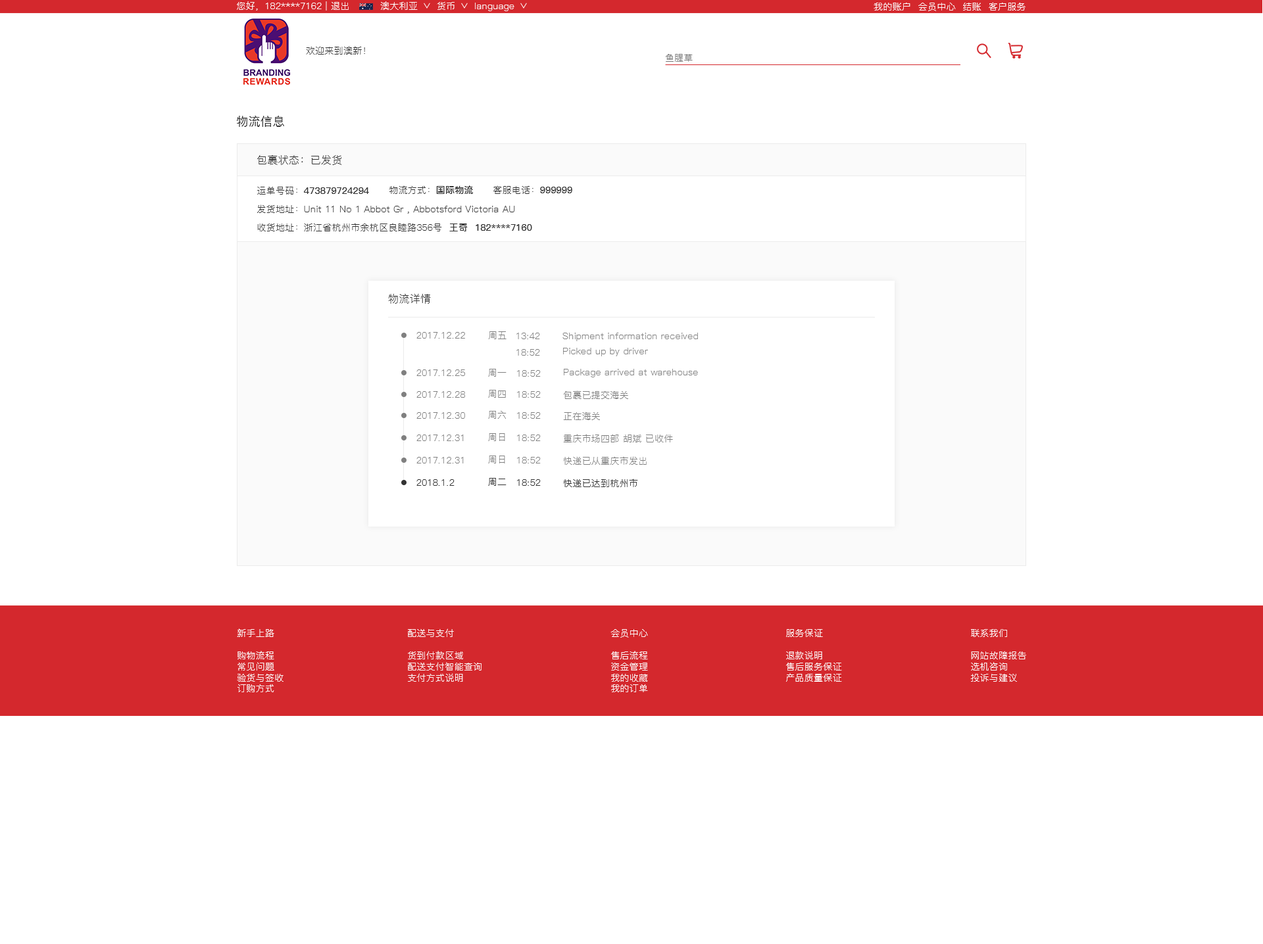
<style>
.page{position:relative;width:1263px;height:944px;background:#ffffff}
.page>*{position:absolute;margin:0}
.t1{font:9.2px "PingFang-SC-Regular";letter-spacing:0.02em;color:#ffffff}
.t2{font:9.2px "PingFang-SC-Regular";letter-spacing:0.02em;color:#333333}
.t3{font:9.2px "PingFang-SC-Regular";letter-spacing:0.02em;color:#767676}
.t4{font:11.8px "PingFang-SC-Medium";letter-spacing:0.02em;color:#333333}
.t5{font:10.5px "PingFang-SC-Regular";letter-spacing:0.02em;color:#333333}
.t6{font:9.2px "PingFang-SC-Bold";letter-spacing:0.02em;color:#333333}
.t7{font:9.2px "PingFang-SC-Regular";letter-spacing:0.02em;color:#808080}
.t8{font:9.2px "PingFang-SC-Regular";letter-spacing:0.02em;color:#fffefe}
</style>
<div class="page">
<p class="t1" style="left:237px;top:1px;width:112px;height:10px">您好，182****7162 | 退出</p>
<p class="t1" style="left:380px;top:1px;width:38px;height:9px">澳大利亚</p>
<p class="t1" style="left:437px;top:2px;width:17px;height:8px">货币</p>
<p class="t1" style="left:475px;top:3px;width:39px;height:8px">language</p>
<p class="t1" style="left:873px;top:2px;width:152px;height:9px">我的账户  会员中心  结账  客户服务</p>
<p class="t2" style="left:306px;top:46px;width:59px;height:9px">欢迎来到澳新！</p>
<p class="t3" style="left:665px;top:54px;width:27px;height:8px">鱼腥草</p>
<p class="t4" style="left:237px;top:116px;width:47px;height:11px">物流信息</p>
<p class="t5" style="left:257px;top:155px;width:85px;height:10px">包裹状态：已发货</p>
<p class="t2" style="left:389px;top:185px;width:84px;height:9px">物流方式：<span class="t6">国际物流</span></p>
<p class="t6" style="left:493px;top:185px;width:79px;height:9px"><span class="t2">客服电话：</span>999999</p>
<p class="t6" style="left:257px;top:187px;width:112px;height:8px"><span class="t2">运单号码：</span>473879724294</p>
<p class="t2" style="left:257px;top:205px;width:258px;height:9px">发货地址：Unit 11 No 1 Abbot Gr , Abbotsford Victoria AU</p>
<p class="t2" style="left:257px;top:223px;width:275px;height:8px">收货地址：浙江省杭州市余杭区良睦路356号  <span class="t6">王奇  182****7160</span></p>
<p class="t5" style="left:388px;top:294px;width:43px;height:10px">物流详情</p>
<p class="t7" style="left:416px;top:332px;width:49px;height:7px">2017.12.22</p>
<p class="t7" style="left:488px;top:331px;width:18px;height:8px">周五</p>
<p class="t7" style="left:516px;top:333px;width:24px;height:6px">13:42</p>
<p class="t7" style="left:562px;top:333px;width:136px;height:8px">Shipment information received</p>
<p class="t7" style="left:516px;top:349px;width:24px;height:7px">18:52</p>
<p class="t7" style="left:563px;top:348px;width:85px;height:8px">Picked up by driver</p>
<p class="t7" style="left:416px;top:370px;width:49px;height:6px">2017.12.25</p>
<p class="t7" style="left:488px;top:369px;width:18px;height:8px">周一</p>
<p class="t7" style="left:517px;top:370px;width:24px;height:7px">18:52</p>
<p class="t7" style="left:564px;top:369px;width:134px;height:8px">Package arrived at warehouse</p>
<p class="t7" style="left:488px;top:390px;width:18px;height:8px">周四</p>
<p class="t7" style="left:416px;top:391px;width:49px;height:7px">2017.12.28</p>
<p class="t7" style="left:517px;top:391px;width:24px;height:7px">18:52</p>
<p class="t7" style="left:563px;top:391px;width:65px;height:8px">包裹已提交海关</p>
<p class="t7" style="left:416px;top:412px;width:49px;height:7px">2017.12.30</p>
<p class="t7" style="left:488px;top:411px;width:18px;height:8px">周六</p>
<p class="t7" style="left:517px;top:412px;width:24px;height:7px">18:52</p>
<p class="t7" style="left:563px;top:412px;width:37px;height:8px">正在海关</p>
<p class="t7" style="left:416px;top:435px;width:48px;height:6px">2017.12.31</p>
<p class="t7" style="left:488px;top:433px;width:17px;height:8px">周日</p>
<p class="t7" style="left:517px;top:435px;width:24px;height:6px">18:52</p>
<p class="t7" style="left:563px;top:434px;width:110px;height:9px">重庆市场四部 胡斌 已收件</p>
<p class="t7" style="left:416px;top:457px;width:48px;height:7px">2017.12.31</p>
<p class="t7" style="left:488px;top:456px;width:17px;height:8px">周日</p>
<p class="t7" style="left:517px;top:457px;width:24px;height:7px">18:52</p>
<p class="t7" style="left:563px;top:456px;width:83px;height:9px">快递已从重庆市发出</p>
<p class="t2" style="left:416px;top:479px;width:38px;height:7px">2018.1.2</p>
<p class="t2" style="left:488px;top:478px;width:18px;height:8px">周二</p>
<p class="t2" style="left:517px;top:479px;width:24px;height:7px">18:52</p>
<p class="t2" style="left:563px;top:479px;width:75px;height:8px">快递已达到杭州市</p>
<p class="t8" style="left:237px;top:629px;width:46px;height:63px">新手上路<br><br>购物流程<br>常见问题<br>验货与签收<br>订购方式</p>
<p class="t8" style="left:408px;top:629px;width:73px;height:53px">配送与支付<br><br>货到付款区域<br>配送支付智能查询<br>支付方式说明</p>
<p class="t8" style="left:610px;top:629px;width:38px;height:63px">会员中心<br><br>售后流程<br>资金管理<br>我的收藏<br>我的订单</p>
<p class="t8" style="left:786px;top:629px;width:56px;height:53px">服务保证<br><br>退款说明<br>售后服务保证<br>产品质量保证</p>
<p class="t8" style="left:970px;top:629px;width:56px;height:53px">联系我们<br><br>网站故障报告<br>选机咨询<br>投诉与建议</p>
</div>
